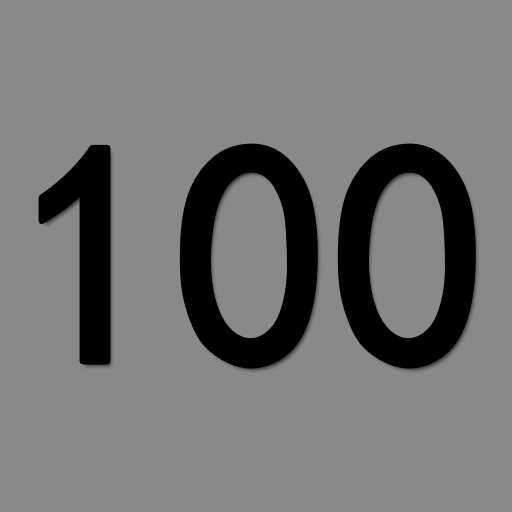
<style>
.page{position:relative;width:512px;height:512px;background:#898989}
.page>*{position:absolute;margin:0}
.t1{font:317.5px "KaiTi";color:#000000}
</style>
<div class="page">
<p class="t1" style="left:41px;top:146px;width:432px;height:220px">100</p>
</div>
